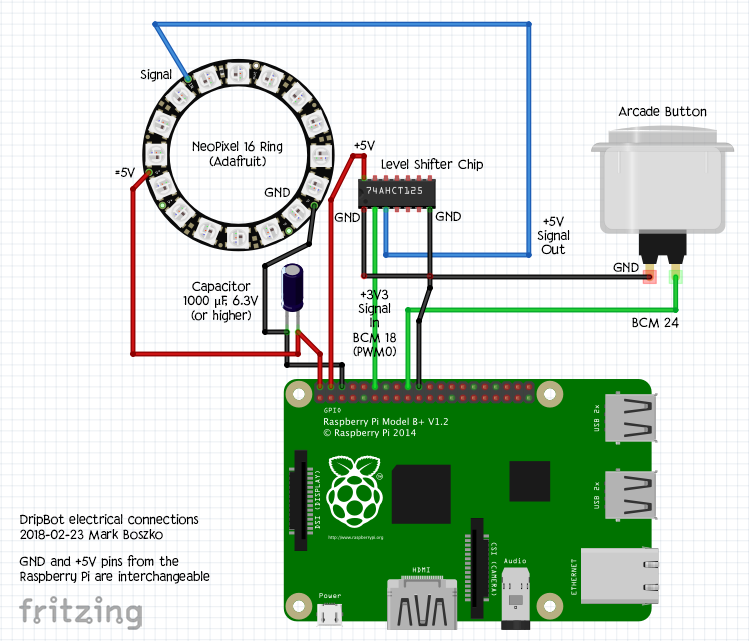
<style>
.page{position:relative;width:749px;height:641px;background:#ffffff}
.page>*{position:absolute;margin:0}
.t1{font:12px "CCDigitalDelivery";color:#000000}
.t2{font:12px "MyriadPro-Regular";color:#000000}
</style>
<div class="page">
<p class="t1" style="left:140px;top:69px;width:32px;height:13px">Signal</p>
<p class="t1" style="left:618px;top:106px;width:89px;height:11px">Arcade Button</p>
<p class="t1" style="left:192px;top:140px;width:91px;height:27px;text-align:center">NeoPixel 16 Ring<br>(Adafruit)</p>
<p class="t1" style="left:354px;top:140px;width:21px;height:11px">+5V</p>
<p class="t1" style="left:381px;top:158px;width:102px;height:14px">Level Shifter Chip</p>
<p class="t1" style="left:115px;top:167px;width:20px;height:11px">=5V</p>
<p class="t1" style="left:264px;top:187px;width:26px;height:11px">GND</p>
<p class="t1" style="left:334px;top:212px;width:26px;height:11px">GND</p>
<p class="t1" style="left:435px;top:211px;width:26px;height:11px">GND</p>
<p class="t1" style="left:537px;top:216px;width:33px;height:39px;text-align:center">+5V<br>Signal<br>Out</p>
<p class="t1" style="left:613px;top:262px;width:26px;height:11px">GND</p>
<p class="t1" style="left:183px;top:281px;width:76px;height:42px;text-align:center">Capacitor<br>1000 <span class="t2">µ</span>F, 6.3V<br>(or higher)</p>
<p class="t1" style="left:353px;top:289px;width:43px;height:68px;text-align:center">+3V3<br>Signal<br>In<br>BCM 18<br>(PWM0)</p>
<p class="t1" style="left:632px;top:317px;width:47px;height:11px">BCM 24</p>
<p class="t1" style="left:20px;top:514px;width:179px;height:26px">DripBot electrical connections<br>2018-02-23 Mark Boszko</p>
<p class="t1" style="left:19px;top:555px;width:191px;height:29px">GND and +5V pins from the<br>Raspberry Pi are interchangeable</p>
</div>
